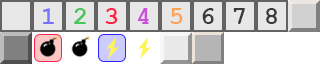
<style>
.page{position:relative;width:320px;height:64px;background:#e7e7e7}
.page>*{position:absolute;margin:0}
.t1{font:25px "CourierNewPS-BoldMT";color:#7471fd}
.t2{font:25px "CourierNewPS-BoldMT";color:#48c559}
.t3{font:25px "CourierNewPS-BoldMT";color:#ff2549}
.t4{font:25px "CourierNewPS-BoldMT";color:#cb4fdb}
.t5{font:25px "CourierNewPS-BoldMT";color:#fca156}
.t6{font:25px "CourierNewPS-BoldMT";color:#393939}
</style>
<div class="page">
<p class="t1" style="left:43px;top:8px;width:11px;height:16px">1</p>
<p class="t2" style="left:74px;top:8px;width:12px;height:16px">2</p>
<p class="t3" style="left:105px;top:8px;width:13px;height:16px">3</p>
<p class="t4" style="left:138px;top:8px;width:11px;height:16px">4</p>
<p class="t5" style="left:170px;top:8px;width:13px;height:16px">5</p>
<p class="t6" style="left:202px;top:8px;width:12px;height:16px">6</p>
<p class="t6" style="left:233px;top:8px;width:12px;height:16px">7</p>
<p class="t6" style="left:266px;top:8px;width:11px;height:16px">8</p>
</div>
